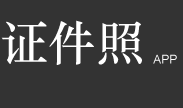
<style>
.page{position:relative;width:183px;height:108px;background:#333333}
.page>*{position:absolute;margin:0}
.t1{font:48px "STZhongsong";color:#ffffff}
.t2{font:12px "ArialMT";color:#ffffff}
</style>
<div class="page">
<p class="t1" style="left:1px;top:20px;width:141px;height:45px">证件照</p>
<p class="t2" style="left:153px;top:54px;width:24px;height:10px">APP</p>
</div>
